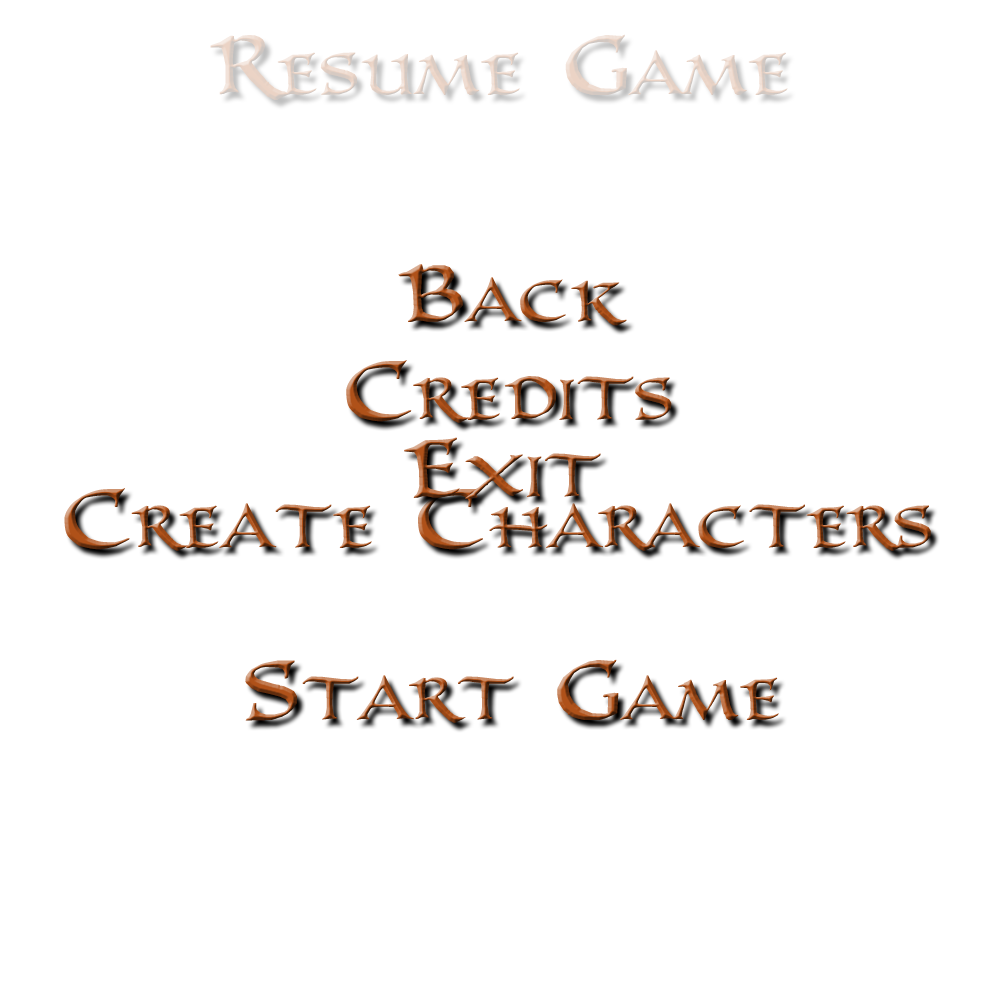
<style>
.page{position:relative;width:1000px;height:1000px;background:#ffffff}
.page>*{position:absolute;margin:0}
.t1{font:86.4px "PR-UncialAltCaps2";color:#ead3c5;font-variant:small-caps;scale:0.83 1}
.t2{font:86.4px "PR-UncialAltCaps2";font-variant:small-caps;scale:0.83 1}
</style>
<div class="page">
<p class="t1" style="left:210px;top:34px;width:578px;height:66px">Resume Game</p>
<p class="t2" style="left:398px;top:264px;width:229px;height:62px">Back</p>
<p class="t2" style="left:346px;top:360px;width:326px;height:63px">Credits</p>
<p class="t2" style="left:404px;top:437px;width:197px;height:62px">Exit</p>
<p class="t2" style="left:64px;top:488px;width:867px;height:63px">Create Characters</p>
<p class="t2" style="left:245px;top:659px;width:534px;height:64px">Start Game</p>
</div>
